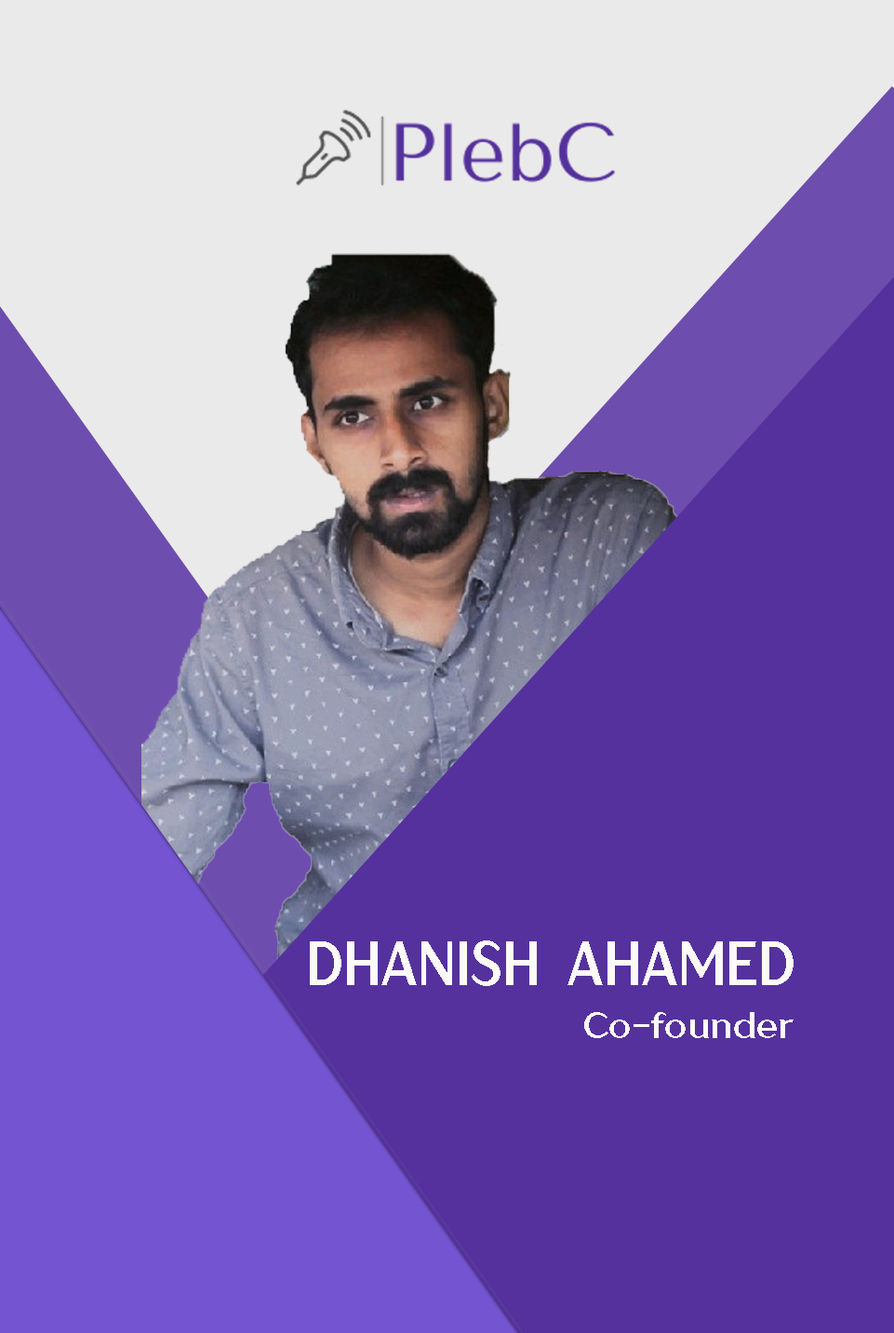
<style>
.page{position:relative;width:894px;height:1333px;background:#55319d}
.page>*{position:absolute;margin:0}
.t1{font:62px "TTDrugsTrial-Bold";color:#fbfaf7;scale:0.82 1}
.t2{font:36.2px "TTDrugsTrial-Bold";color:#fdfbf8}
</style>
<div class="page">
<p class="t1" style="left:310px;top:941px;width:484px;height:45px">DHANISH  AHAMED</p>
<p class="t2" style="left:584px;top:1012px;width:210px;height:26px">Co-founder</p>
</div>
